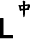
<style>
.page{position:relative;width:30px;height:39px;background:#ffffff}
.page>*{position:absolute;margin:0}
.t1{font:18px "DFKaiShu-SB-Estd-BF";color:#000000;font-weight:bold}
.t2{font:27px "ArialMT";color:#000000;font-weight:bold}
</style>
<div class="page">
<p class="t1" style="left:18px;top:0px;width:13px;height:18px">中</p>
<p class="t2" style="left:0px;top:18px;width:13px;height:21px">L</p>
</div>
